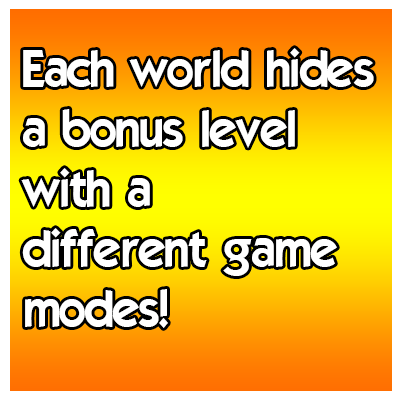
<style>
.page{position:relative;width:400px;height:400px}
.page>*{position:absolute;margin:0}
.t1{font:50px "ELEGANCE";color:#ffffff}
</style>
<div class="page">
<p class="t1" style="left:21px;top:48px;width:353px;height:280px">Each world hides<br>a bonus level<br>with a <br>different game<br>modes!</p>
</div>
